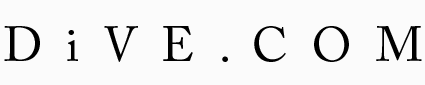
<style>
.page{position:relative;width:425px;height:85px;background:#fbfbfb}
.page>*{position:absolute;margin:0}
.t1{font:48px "ACaslonPro-Regular";color:#000000}
</style>
<div class="page">
<p class="t1" style="left:4px;top:26px;width:418px;height:36px">D  i  V  E  .  C  O  M</p>
</div>
